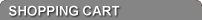
<style>
.page{position:relative;width:202px;height:20px;background:#858585}
.page>*{position:absolute;margin:0}
.t1{font:13.3px "Arial-BoldMT";color:#ffffff}
</style>
<div class="page">
<p class="t1" style="left:9px;top:5px;width:111px;height:11px">SHOPPING CART</p>
</div>
